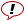
<style>
.page{position:relative;width:25px;height:21px;background:#ffffff}
.page>*{position:absolute;margin:0}
.t1{font:14px "Arial-BoldItalicMT";color:#000000}
</style>
<div class="page">
<p class="t1" style="left:9px;top:4px;width:5px;height:10px">!</p>
<p class="t1" style="left:10px;top:4px;width:5px;height:10px">!</p>
</div>
